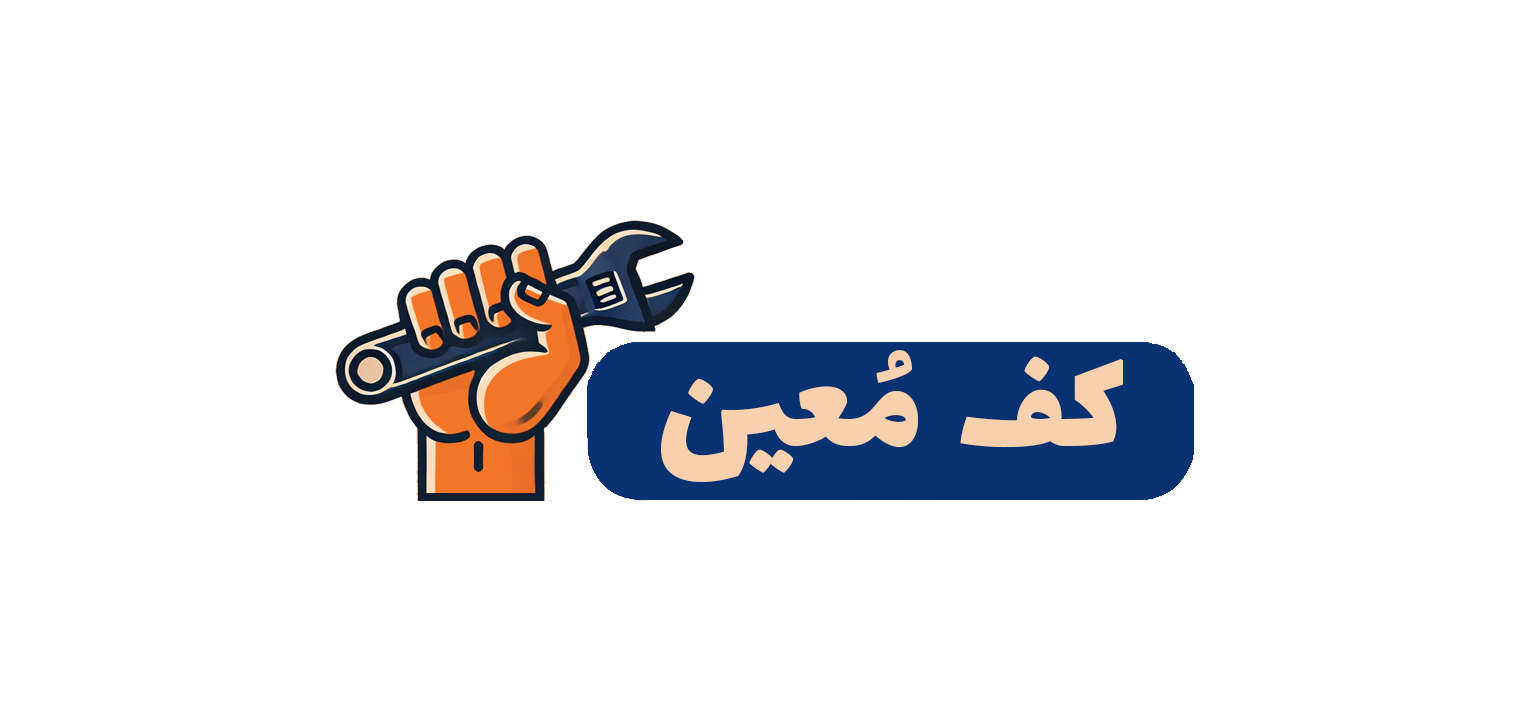
<style>
.page{position:relative;width:1530px;height:722px;background:#ffffff}
.page>*{position:absolute;margin:0}
.t1{font:145px "Lalezar-Regular";letter-spacing:0.02em;color:#f7d1ae}
</style>
<div class="page">
<p class="t1" style="left:661px;top:350px;width:462px;height:132px">كف مُعين</p>
</div>
